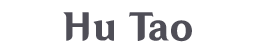
<style>
.page{position:relative;width:256px;height:56px;background:#ffffff}
.page>*{position:absolute;margin:0}
.t1{font:36px "HYWenHei-HEW";color:#4f4e57}
</style>
<div class="page">
<p class="t1" style="left:63px;top:12px;width:129px;height:30px">Hu Tao</p>
</div>
